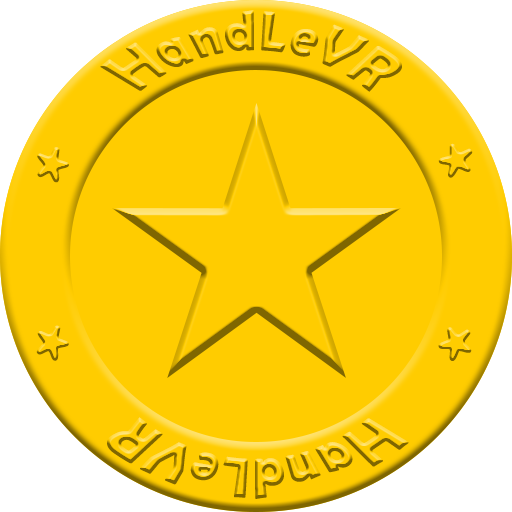
<style>
.page{position:relative;width:512px;height:512px;background:#ffcc00}
.page>*{position:absolute;margin:0}
.t1{font:45.3px/160px "BerlinSansFBDemi-Bold";letter-spacing:0.05em}
.t2{font:85.3px "BerlinSansFBDemi-Bold";letter-spacing:0.05em}
.t3{font:45.3px "BerlinSansFBDemi-Bold";letter-spacing:0.05em}
</style>
<div class="page">
<p class="t1" style="left:100px;top:10px;width:302px;height:82px">HandLeVR</p>
<p class="t2" style="left:37px;top:147px;width:32px;height:36px;rotate:17deg">*</p>
<p class="t2" style="left:438px;top:143px;width:35px;height:35px;rotate:56deg">*</p>
<p class="t2" style="left:36px;top:325px;width:33px;height:36px;rotate:21deg">*</p>
<p class="t2" style="left:438px;top:327px;width:34px;height:34px;rotate:47deg">*</p>
<p class="t3" style="left:107px;top:417px;width:302px;height:82px;rotate:-180deg">HandLeVR</p>
</div>
